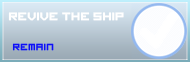
<style>
.page{position:relative;width:190px;height:62px}
.page>*{position:absolute;margin:0}
.t1{font:12px "imagine-font";color:#ffffff;font-weight:bold}
.t2{font:10px "imagine-font";color:#0f0ff6;font-weight:bold}
</style>
<div class="page">
<p class="t1" style="left:8px;top:12px;width:116px;height:9px">REVIVE THE SHIP</p>
<p class="t2" style="left:12px;top:43px;width:42px;height:8px">remain</p>
</div>
